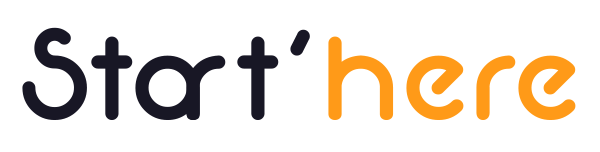
<style>
.page{position:relative;width:600px;height:152px;background:#ffffff}
.page>*{position:absolute;margin:0}
.t1{font:131.7px "Neon80s";color:#181725}
.t2{font:131.7px "Neon80s";color:#ff9a18}
</style>
<div class="page">
<p class="t1" style="left:22px;top:27px;width:178px;height:93px">Sta</p>
<p class="t1" style="left:186px;top:29px;width:124px;height:91px">rt’</p>
<p class="t2" style="left:328px;top:36px;width:248px;height:84px">here</p>
</div>
